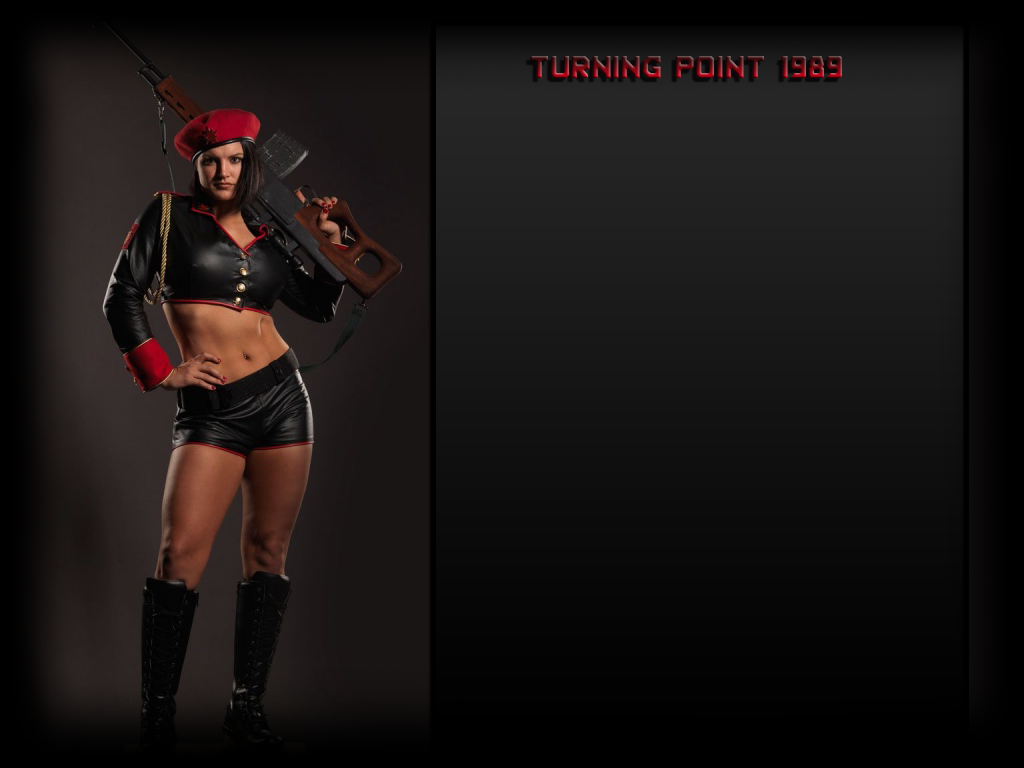
<style>
.page{position:relative;width:1024px;height:768px}
.page>*{position:absolute;margin:0}
.t1{font:30px "BackInTheUSSRDL"}
</style>
<div class="page">
<p class="t1" style="left:530px;top:56px;width:312px;height:22px">TURNING POINT 1989</p>
</div>
